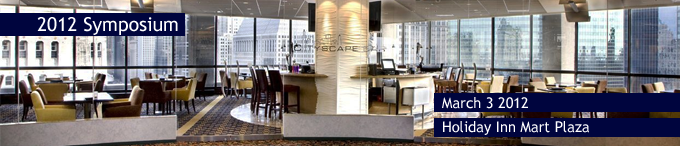
<style>
.page{position:relative;width:680px;height:146px}
.page>*{position:absolute;margin:0}
.t1{font:19.3px "TrebuchetMS";color:#ffffff}
.t2{font:14.7px "TrebuchetMS";color:#ffffff}
</style>
<div class="page">
<p class="t1" style="left:37px;top:17px;width:141px;height:18px">2012 Symposium</p>
<p class="t2" style="left:442px;top:97px;width:86px;height:12px">March 3 2012</p>
<p class="t2" style="left:443px;top:121px;width:146px;height:14px">Holiday Inn Mart Plaza</p>
</div>
